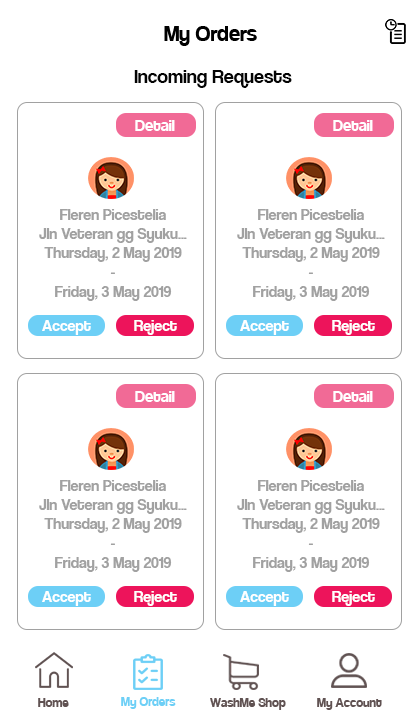
<style>
.page{position:relative;width:420px;height:720px;background:#ffffff}
.page>*{position:absolute;margin:0}
.t1{font:24px "Coolvetica-Regular";color:#000000}
.t2{font:20px "CoolveticaRg-Regular";color:#040404}
.t3{font:18px "Coolvetica-Regular";color:#ffffff}
.t4{font:16px "CoolveticaRg-Regular";color:#a1a1a1}
.t5{font:16px "CoolveticaRg-Regular";color:#ffffff}
.t6{font:14px "Coolvetica-Regular";color:#605252}
.t7{font:14px "Coolvetica-Regular";color:#6dcff6}
</style>
<div class="page">
<p class="t1" style="left:164px;top:26px;width:93px;height:20px">My Orders</p>
<p class="t2" style="left:134px;top:70px;width:158px;height:18px">Incoming Requests</p>
<p class="t3" style="left:135px;top:120px;width:40px;height:11px">Detail</p>
<p class="t3" style="left:333px;top:120px;width:40px;height:11px">Detail</p>
<p class="t4" style="left:39px;top:209px;width:148px;height:92px;text-align:center">Fleren Picestelia<br>Jln Veteran gg Syuku...<br>Thursday, 2 May 2019<br>-<br>Friday, 3 May 2019</p>
<p class="t4" style="left:237px;top:209px;width:148px;height:92px;text-align:center">Fleren Picestelia<br>Jln Veteran gg Syuku...<br>Thursday, 2 May 2019<br>-<br>Friday, 3 May 2019</p>
<p class="t5" style="left:42px;top:320px;width:49px;height:15px">Accept</p>
<p class="t5" style="left:134px;top:320px;width:43px;height:15px">Reject</p>
<p class="t5" style="left:240px;top:320px;width:49px;height:15px">Accept</p>
<p class="t5" style="left:332px;top:320px;width:43px;height:15px">Reject</p>
<p class="t3" style="left:135px;top:391px;width:40px;height:11px">Detail</p>
<p class="t3" style="left:333px;top:391px;width:40px;height:11px">Detail</p>
<p class="t4" style="left:39px;top:480px;width:148px;height:92px;text-align:center">Fleren Picestelia<br>Jln Veteran gg Syuku...<br>Thursday, 2 May 2019<br>-<br>Friday, 3 May 2019</p>
<p class="t4" style="left:237px;top:480px;width:148px;height:92px;text-align:center">Fleren Picestelia<br>Jln Veteran gg Syuku...<br>Thursday, 2 May 2019<br>-<br>Friday, 3 May 2019</p>
<p class="t5" style="left:42px;top:591px;width:49px;height:15px">Accept</p>
<p class="t5" style="left:134px;top:591px;width:43px;height:15px">Reject</p>
<p class="t5" style="left:240px;top:591px;width:49px;height:15px">Accept</p>
<p class="t5" style="left:332px;top:591px;width:43px;height:15px">Reject</p>
<p class="t6" style="left:38px;top:698px;width:31px;height:9px">Home</p>
<p class="t7" style="left:121px;top:697px;width:55px;height:12px">My Orders</p>
<p class="t6" style="left:210px;top:698px;width:76px;height:12px">WashMe Shop</p>
<p class="t6" style="left:317px;top:698px;width:65px;height:12px">My Account</p>
</div>
